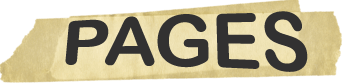
<style>
.page{position:relative;width:344px;height:84px;background:#ffffff}
.page>*{position:absolute;margin:0}
.t1{font:72px "ArialRoundedMTBold";color:#323131}
</style>
<div class="page">
<p class="t1" style="left:65px;top:11px;width:243px;height:61px">PAGES</p>
</div>
